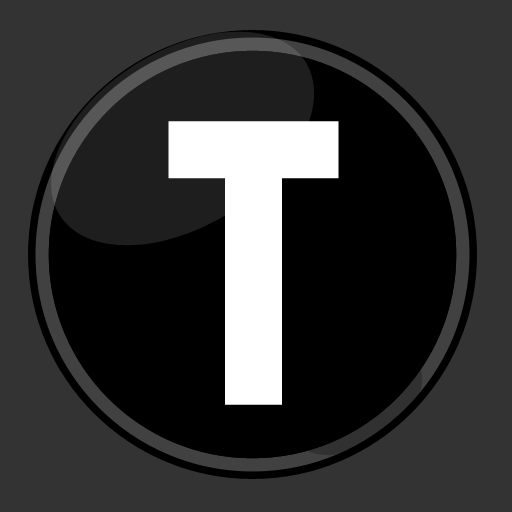
<style>
.page{position:relative;width:512px;height:512px;background:#333333}
.page>*{position:absolute;margin:0}
.t1{font:475.9px "Silkscreen";color:#ffffff}
</style>
<div class="page">
<p class="t1" style="left:168px;top:121px;width:171px;height:284px">T</p>
</div>
